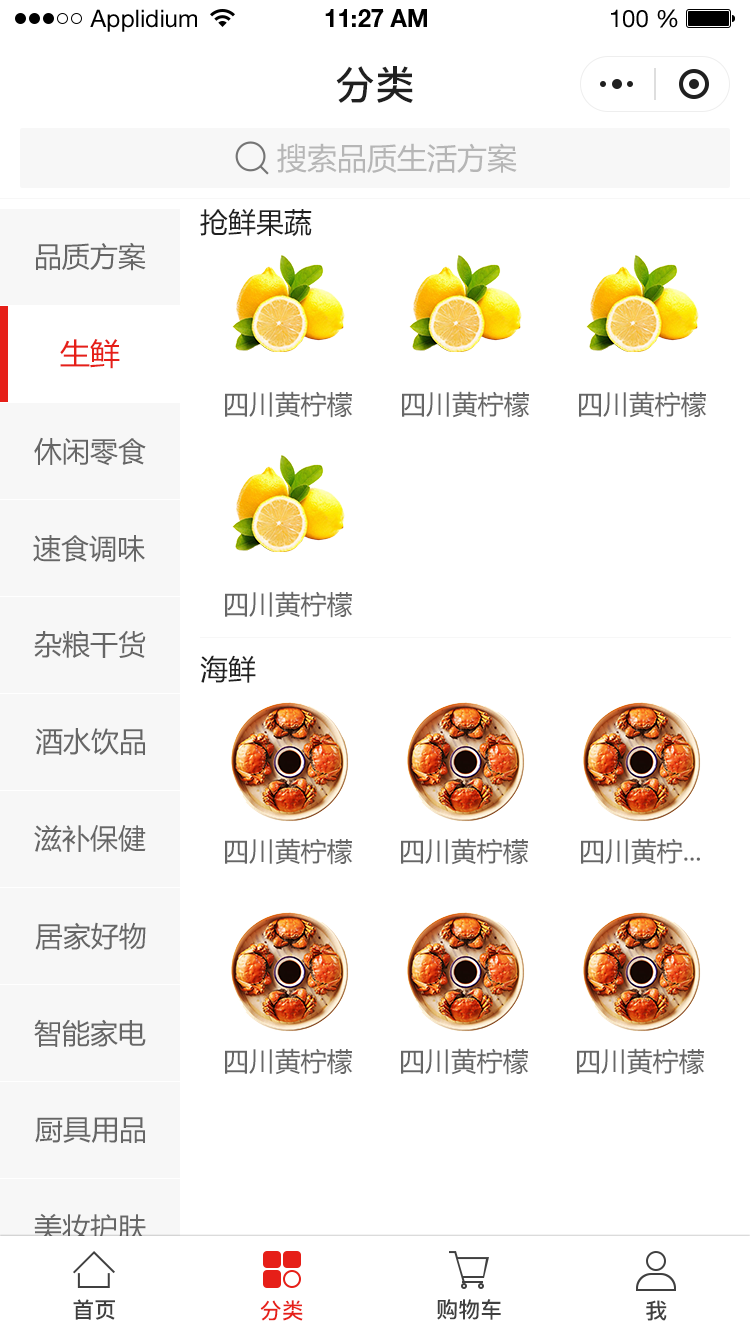
<style>
.page{position:relative;width:750px;height:1334px;background:#ffffff}
.page>*{position:absolute;margin:0}
.t1{font:24px "HelveticaNeueLTStd-Roman";color:#000000}
.t2{font:24px "HelveticaNeueLTStd-Bd";color:#000000}
.t3{font:40px "PingFang-SC-Bold";color:#202020;text-transform:uppercase}
.t4{font:30px "MicrosoftYaHei";color:#b6b6b6;text-transform:uppercase}
.t5{font:28px "MicrosoftYaHei";color:#202020;text-transform:uppercase}
.t6{font:28px "MicrosoftYaHei";color:#666666;text-transform:uppercase}
.t7{font:30px "MicrosoftYaHei";color:#e61f18;text-transform:uppercase}
.t8{font:26px "MicrosoftYaHei";color:#666666;text-transform:uppercase}
.t9{font:22px "PingFang-SC-Bold";color:#404040;text-transform:uppercase}
.t10{font:22px "PingFang-SC-Bold";color:#e61f18;text-transform:uppercase}
</style>
<div class="page">
<p class="t1" style="left:90px;top:9px;width:107px;height:23px">Applidium</p>
<p class="t2" style="left:325px;top:9px;width:102px;height:18px">11:27 AM</p>
<p class="t1" style="left:611px;top:9px;width:67px;height:19px">100 %</p>
<p class="t3" style="left:336px;top:66px;width:77px;height:37px">分类</p>
<p class="t4" style="left:277px;top:143px;width:240px;height:30px">搜索品质生活方案</p>
<p class="t5" style="left:200px;top:208px;width:112px;height:29px">抢鲜果蔬</p>
<p class="t6" style="left:36px;top:242px;width:110px;height:29px">品质方案</p>
<p class="t7" style="left:60px;top:339px;width:60px;height:30px">生鲜</p>
<p class="t8" style="left:225px;top:391px;width:128px;height:27px">四川黄柠檬</p>
<p class="t8" style="left:402px;top:391px;width:128px;height:27px">四川黄柠檬</p>
<p class="t8" style="left:579px;top:391px;width:128px;height:27px">四川黄柠檬</p>
<p class="t6" style="left:34px;top:437px;width:112px;height:29px">休闲零食</p>
<p class="t6" style="left:33px;top:535px;width:112px;height:27px">速食调味</p>
<p class="t8" style="left:225px;top:591px;width:128px;height:27px">四川黄柠檬</p>
<p class="t6" style="left:34px;top:630px;width:112px;height:28px">杂粮干货</p>
<p class="t5" style="left:200px;top:655px;width:56px;height:28px">海鲜</p>
<p class="t6" style="left:35px;top:728px;width:110px;height:27px">酒水饮品</p>
<p class="t6" style="left:34px;top:825px;width:112px;height:27px">滋补保健</p>
<p class="t8" style="left:225px;top:838px;width:128px;height:27px">四川黄柠檬</p>
<p class="t8" style="left:401px;top:838px;width:128px;height:27px">四川黄柠檬</p>
<p class="t8" style="left:581px;top:838px;width:119px;height:27px">四川黄柠...</p>
<p class="t6" style="left:35px;top:922px;width:111px;height:28px">居家好物</p>
<p class="t6" style="left:34px;top:1019px;width:112px;height:28px">智能家电</p>
<p class="t8" style="left:225px;top:1048px;width:128px;height:27px">四川黄柠檬</p>
<p class="t8" style="left:401px;top:1048px;width:128px;height:27px">四川黄柠檬</p>
<p class="t8" style="left:577px;top:1048px;width:128px;height:27px">四川黄柠檬</p>
<p class="t6" style="left:35px;top:1117px;width:110px;height:26px">厨具用品</p>
<p class="t6" style="left:34px;top:1213px;width:112px;height:28px">美妆护肤</p>
<p class="t9" style="left:73px;top:1299px;width:42px;height:21px">首页</p>
<p class="t10" style="left:260px;top:1300px;width:43px;height:21px">分类</p>
<p class="t9" style="left:437px;top:1299px;width:64px;height:21px">购物车</p>
<p class="t9" style="left:646px;top:1300px;width:21px;height:21px">我</p>
</div>
